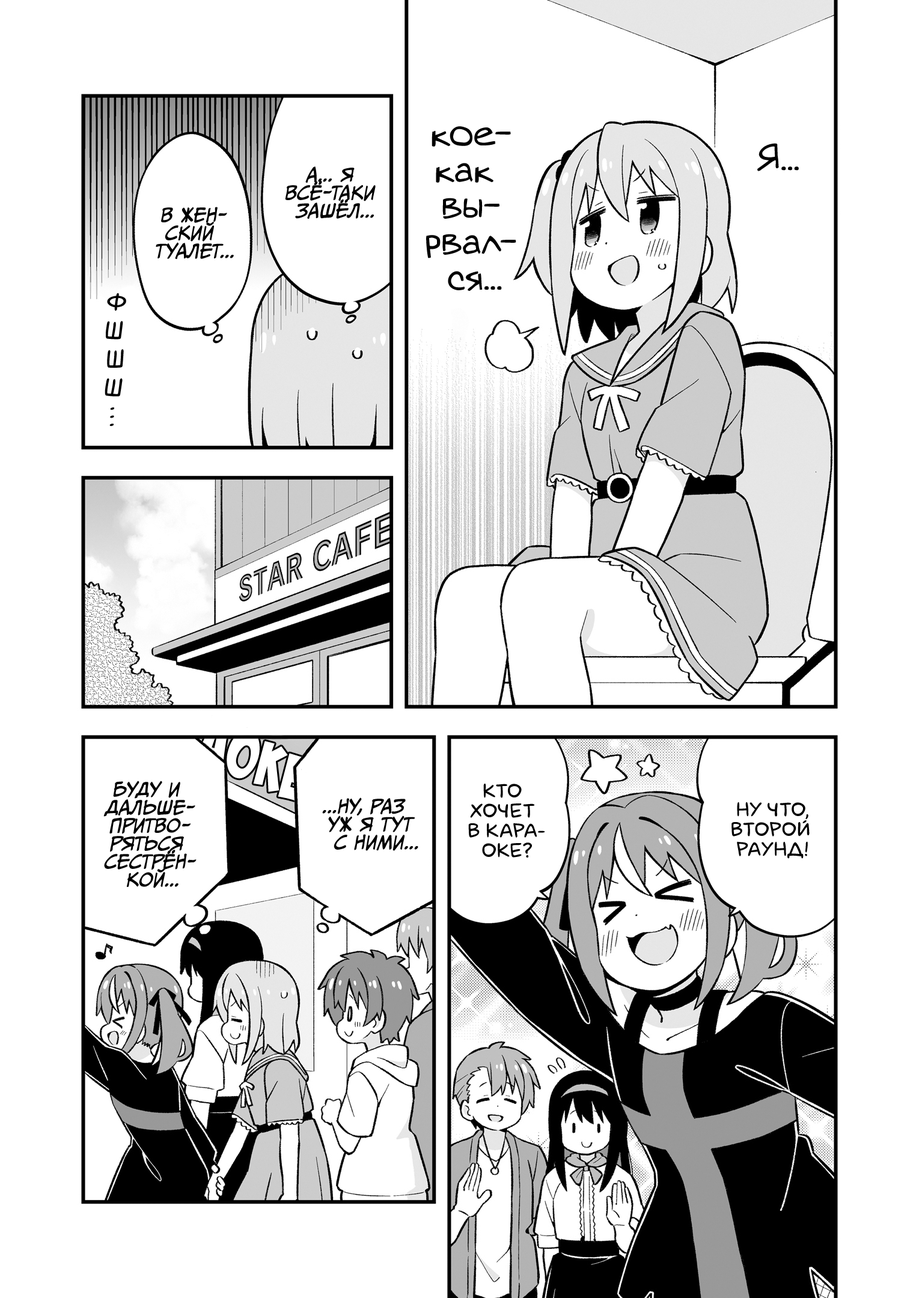
<style>
.page{position:relative;width:919px;height:1298px;background:#ffffff}
.page>*{position:absolute;margin:0}
.t1{font:36.1px "v_Augie";color:#000000}
.t2{font:18px "CCMeanwhile";color:#000000;text-transform:uppercase;font-style:italic}
.t3{font:28.8px "v_MangaMasterBB";color:#000000;text-transform:uppercase}
.t4{font:19.8px "laCartoonerie";color:#000000;text-transform:uppercase}
</style>
<div class="page">
<p class="t1" style="left:426px;top:126px;width:90px;height:165px;text-align:center">кое-<br>как<br>вы-<br>рвал-<br>ся...</p>
<p class="t1" style="left:757px;top:143px;width:42px;height:28px">Я...</p>
<p class="t2" style="left:285px;top:166px;width:91px;height:53px;text-align:center">А... Я<br>всё-таки<br>зашёл...</p>
<p class="t2" style="left:156px;top:207px;width:78px;height:52px;text-align:center">В жен-<br>ский<br>туалет...</p>
<p class="t3" style="left:107px;top:293px;width:19px;height:18px;rotate:5deg">ф</p>
<p class="t3" style="left:106px;top:321px;width:17px;height:18px;rotate:6deg">ш</p>
<p class="t3" style="left:107px;top:349px;width:17px;height:19px;rotate:3deg">ш</p>
<p class="t3" style="left:105px;top:378px;width:18px;height:19px;rotate:8deg">ш</p>
<p class="t3" style="left:110px;top:407px;width:4px;height:3px">.</p>
<p class="t3" style="left:109px;top:424px;width:5px;height:2px">.</p>
<p class="t3" style="left:110px;top:415px;width:4px;height:3px">.</p>
<p class="t2" style="left:103px;top:781px;width:93px;height:107px;text-align:center">Буду и<br>дальше-<br>притво-<br>ряться<br>сестрён-<br>кой...</p>
<p class="t4" style="left:468px;top:784px;width:77px;height:73px;text-align:center">Кто<br>хочет<br>в кара-<br>оке?</p>
<p class="t2" style="left:322px;top:797px;width:96px;height:54px;text-align:center">...Ну, раз<br>уж я тут<br>с ними...</p>
<p class="t4" style="left:731px;top:802px;width:78px;height:57px;text-align:center">Ну что,<br>второй<br>раунд!</p>
</div>
